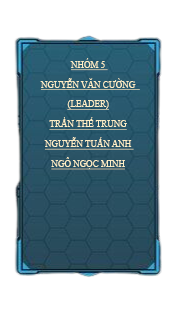
<style>
.page{position:relative;width:181px;height:313px;background:#ffffff}
.page>*{position:absolute;margin:0}
.t1{font:10px/19.8px "TimesNewRomanPSMT";color:#ffefc6;text-transform:uppercase;text-decoration:underline;scale:0.9 1}
</style>
<div class="page">
<p class="t1" style="left:40px;top:58px;width:100px;height:112px;text-align:center">nhóm 5 <br>Nguyễn văn cường  <br>(leader)<br>trần thế trung<br>nguyễn tuấn anh <br>Ngô ngọc minh</p>
</div>
